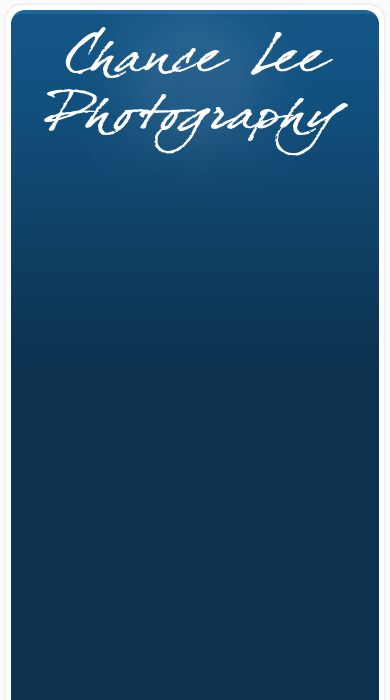
<style>
.page{position:relative;width:390px;height:700px;background:#0d324f}
.page>*{position:absolute;margin:0}
.t1{font:48px "DearJoefour";color:#ffffff;scale:1.3 1}
</style>
<div class="page">
<p class="t1" style="left:44px;top:27px;width:304px;height:129px;text-align:center">Chance Lee Photography</p>
</div>
